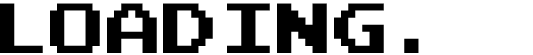
<style>
.page{position:relative;width:533px;height:55px;background:#ffffff}
.page>*{position:absolute;margin:0}
.t1{font:56.5px "PressStart2P";color:#000000}
</style>
<div class="page">
<p class="t1" style="left:0px;top:3px;width:419px;height:50px">LOADING.</p>
</div>
